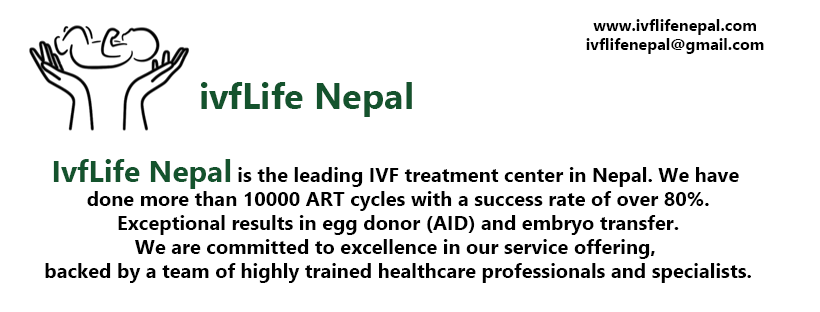
<style>
.page{position:relative;width:820px;height:312px;background:#ffffff}
.page>*{position:absolute;margin:0}
.t1{font:16px "NirmalaUI-Bold";color:#000000}
.t2{font:36px "NirmalaUI-Bold";color:#14532d}
.t3{font:20px "NirmalaUI-Bold";color:#000000}
.t4{font:30px "NirmalaUI-Bold";color:#14532d}
</style>
<div class="page">
<p class="t1" style="left:586px;top:19px;width:178px;height:35px;text-align:center">www.ivflifenepal.com<br>ivflifenepal@gmail.com</p>
<p class="t2" style="left:201px;top:82px;width:211px;height:35px">ivfLife Nepal</p>
<p class="t3" style="left:45px;top:159px;width:706px;height:124px;text-align:center"><span class="t4">IvfLife Nepal </span>is the leading IVF treatment center in Nepal. We have <br>done more than 10000 ART cycles with a success rate of over 80%.<br> Exceptional results in egg donor (AID) and embryo transfer. <br>We are committed to excellence in our service offering, <br>backed by a team of highly trained healthcare professionals and specialists.</p>
</div>
